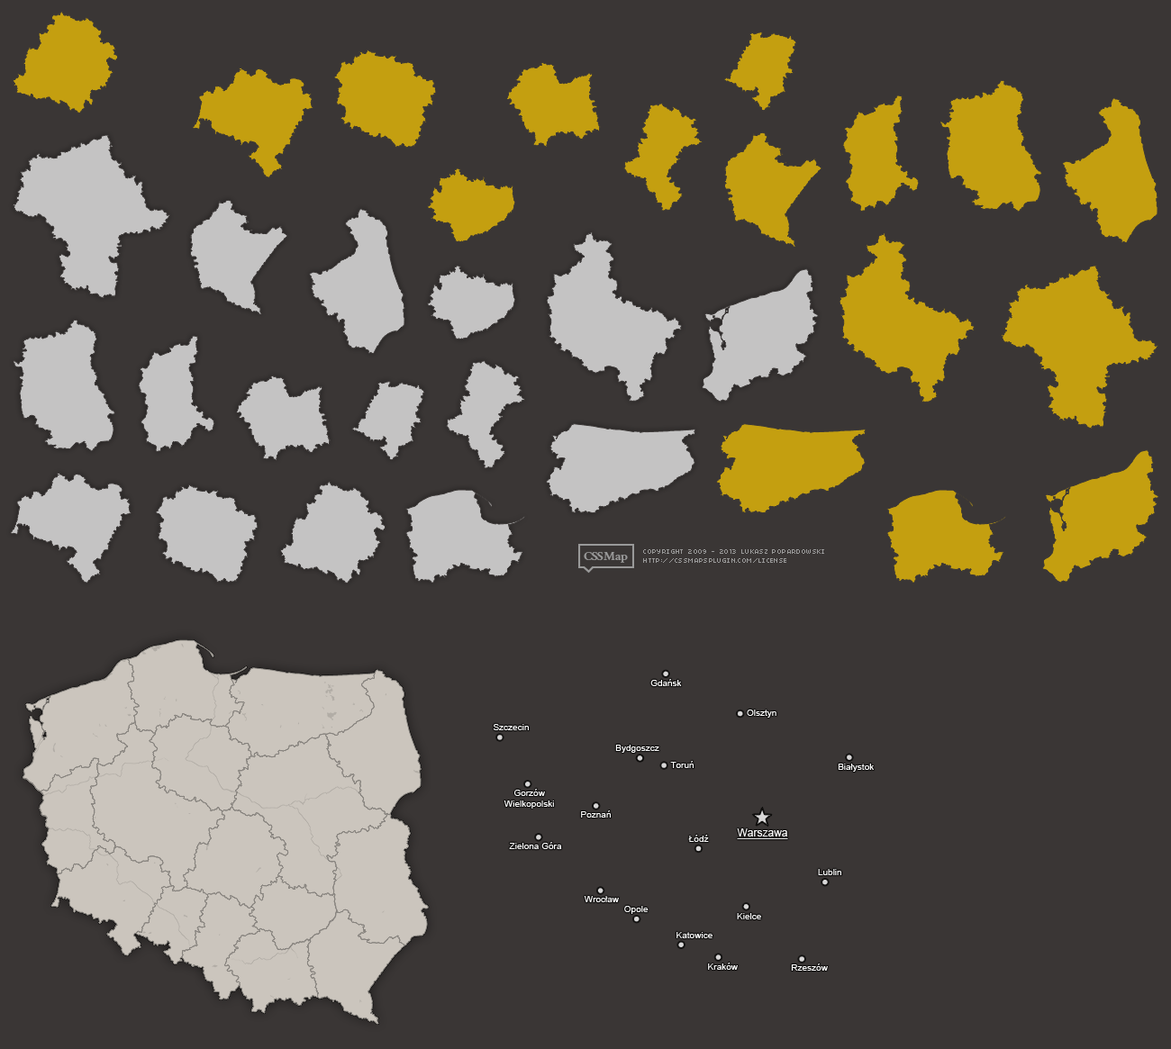
<style>
.page{position:relative;width:1171px;height:1049px;background:#3a3635}
.page>*{position:absolute;margin:0}
.t1{font:9px "ArialMT";color:#ffffff}
.t2{font:10.8px "ArialMT";color:#ffffff;text-decoration:underline}
</style>
<div class="page">
<p class="t1" style="left:650px;top:679px;width:32px;height:7px">Gdańsk</p>
<p class="t1" style="left:747px;top:710px;width:29px;height:8px">Olsztyn</p>
<p class="t1" style="left:493px;top:724px;width:36px;height:6px">Szczecin</p>
<p class="t1" style="left:615px;top:745px;width:44px;height:8px">Bydgoszcz</p>
<p class="t1" style="left:670px;top:761px;width:23px;height:7px">Toruń</p>
<p class="t1" style="left:838px;top:764px;width:36px;height:8px">Białystok</p>
<p class="t1" style="left:503px;top:789px;width:51px;height:20px;text-align:center">Gorzów<br>Wielkopolski</p>
<p class="t1" style="left:581px;top:810px;width:30px;height:8px">Poznań</p>
<p class="t2" style="left:737px;top:828px;width:51px;height:11px">Warszawa</p>
<p class="t1" style="left:509px;top:842px;width:53px;height:7px">Zielona Góra</p>
<p class="t1" style="left:688px;top:835px;width:21px;height:7px">Łódź</p>
<p class="t1" style="left:818px;top:869px;width:23px;height:6px">Lublin</p>
<p class="t1" style="left:584px;top:896px;width:35px;height:6px">Wrocław</p>
<p class="t1" style="left:624px;top:906px;width:24px;height:8px">Opole</p>
<p class="t1" style="left:737px;top:913px;width:24px;height:6px">Kielce</p>
<p class="t1" style="left:676px;top:932px;width:36px;height:6px">Katowice</p>
<p class="t1" style="left:708px;top:963px;width:30px;height:7px">Kraków</p>
<p class="t1" style="left:791px;top:964px;width:37px;height:7px">Rzeszów</p>
</div>
